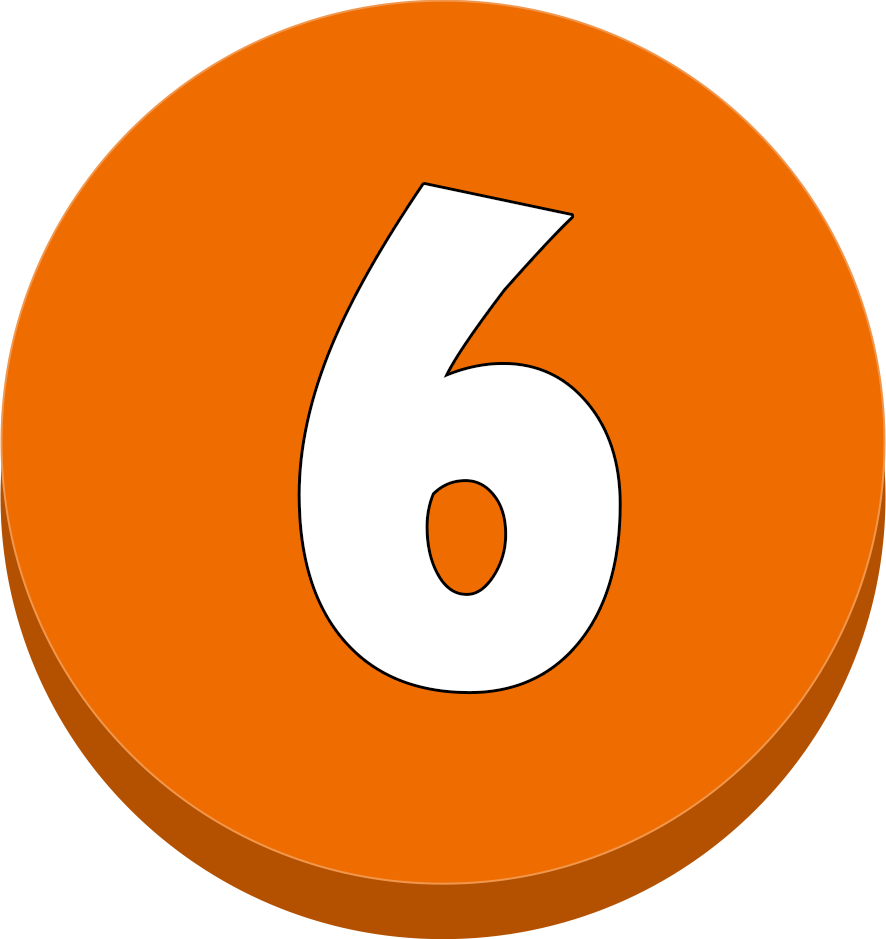
<style>
.page{position:relative;width:886px;height:939px;background:#ef6c00}
.page>*{position:absolute;margin:0}
.t1{font:637.2px "ShowcardGothic-Reg";color:#ffffff}
</style>
<div class="page">
<p class="t1" style="left:300px;top:185px;width:319px;height:507px">6</p>
</div>
